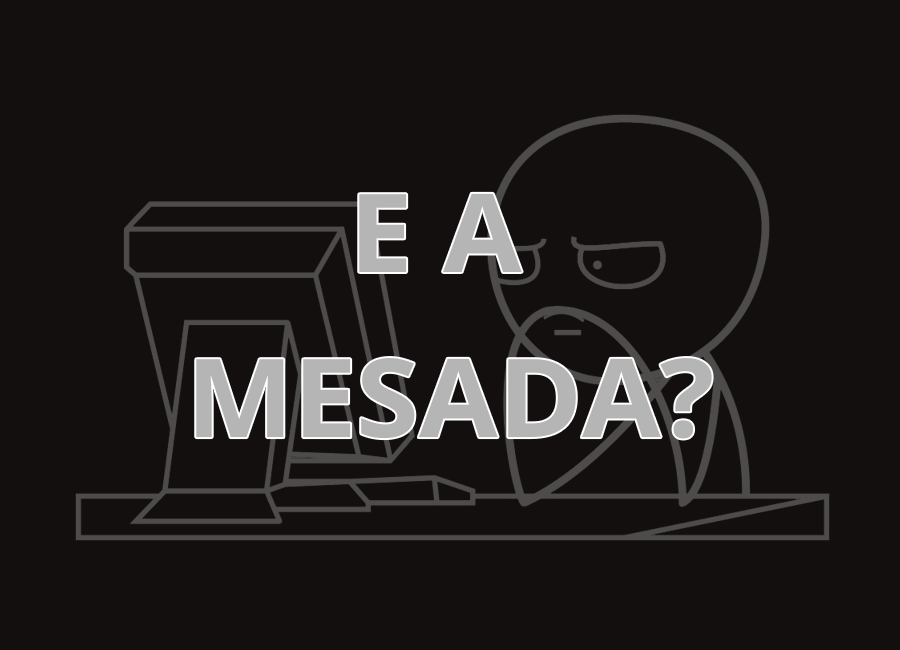
<style>
.page{position:relative;width:900px;height:650px;background:#130f0f}
.page>*{position:absolute;margin:0}
.t1{font:109px/15px "OpenSans-Bold";color:#b5b5b5;scale:1.04 1}
</style>
<div class="page">
<p class="t1" style="left:196px;top:193px;width:516px;height:246px;text-align:center">E A <br><br><br><br><br><br><br><br><br><br><br>MESADA?</p>
</div>
